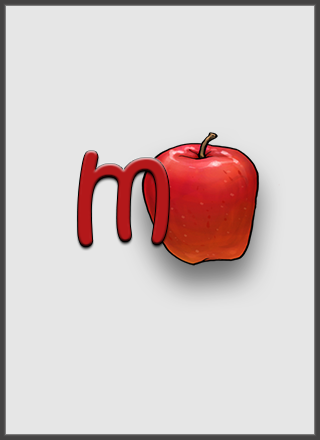
<style>
.page{position:relative;width:320px;height:440px;background:#e6e6e6}
.page>*{position:absolute;margin:0}
.t1{font:133px "KristenITC-Regular";color:#b3181a}
</style>
<div class="page">
<p class="t1" style="left:78px;top:151px;width:91px;height:95px">m</p>
</div>
